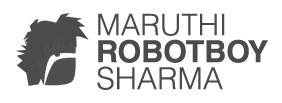
<style>
.page{position:relative;width:282px;height:103px;background:#ffffff}
.page>*{position:absolute;margin:0}
.t1{font:30.5px/27px "HelveticaLTStd-Bold";color:#4b4b4b;text-transform:uppercase}
.t2{font:29.5px/27px "HelveticaLTStd-Light";color:#4b4b4b;text-transform:uppercase}
.t3{font:30.5px/27px "HelveticaLTStd-Light";color:#4b4b4b;text-transform:uppercase}
</style>
<div class="page">
<p class="t1" style="left:97px;top:13px;width:171px;height:77px;text-align:justify"><span class="t2">MARUTHI<br></span>ROBOTBOY<br><span class="t3">SHARMA</span></p>
</div>
